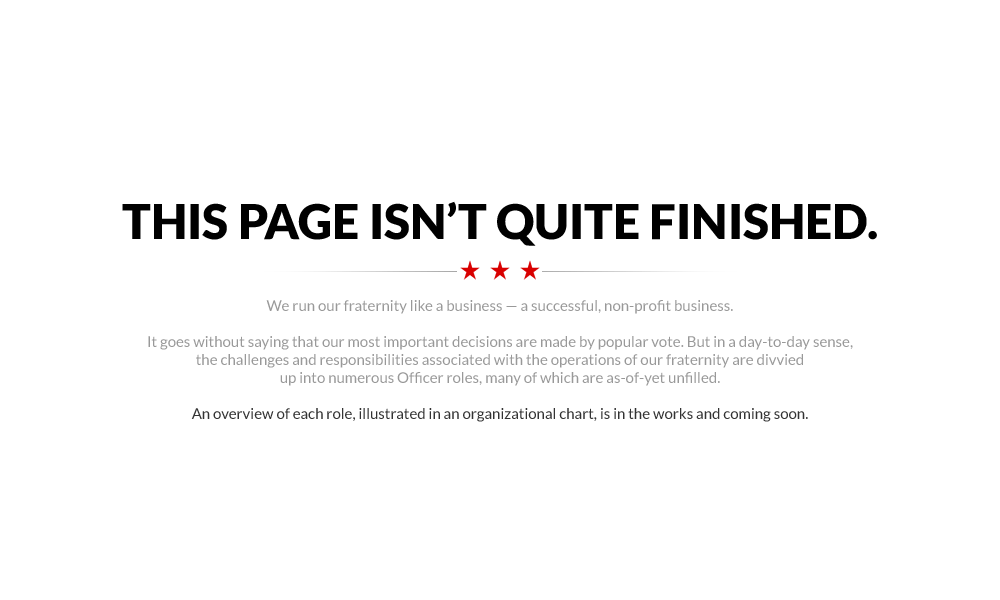
<style>
.page{position:relative;width:1000px;height:600px;background:#ffffff}
.page>*{position:absolute;margin:0}
.t1{font:15px/18px "Lato-Regular";color:#999999}
.t2{font:48px/36px "Lato-Black";color:#000000}
.t3{font:15px/18px "Lato-Regular";color:#333333}
</style>
<div class="page">
<p class="t1" style="left:122px;top:201px;width:755px;height:221px;text-align:center"><span class="t2">THIS PAGE ISN’T QUITE FINISHED.<br></span><br><br><br>We run our fraternity like a business — a successful, non-profit business.<br><br>It goes without saying that our most important decisions are made by popular vote. But in a day-to-day sense,<br>the challenges and responsibilities associated with the operations of our fraternity are divvied<br>up into numerous Officer roles, many of which are as-of-yet unfilled.<br><br><span class="t3">An overview of each role, illustrated in an organizational chart, is in the works and coming soon.</span></p>
</div>
